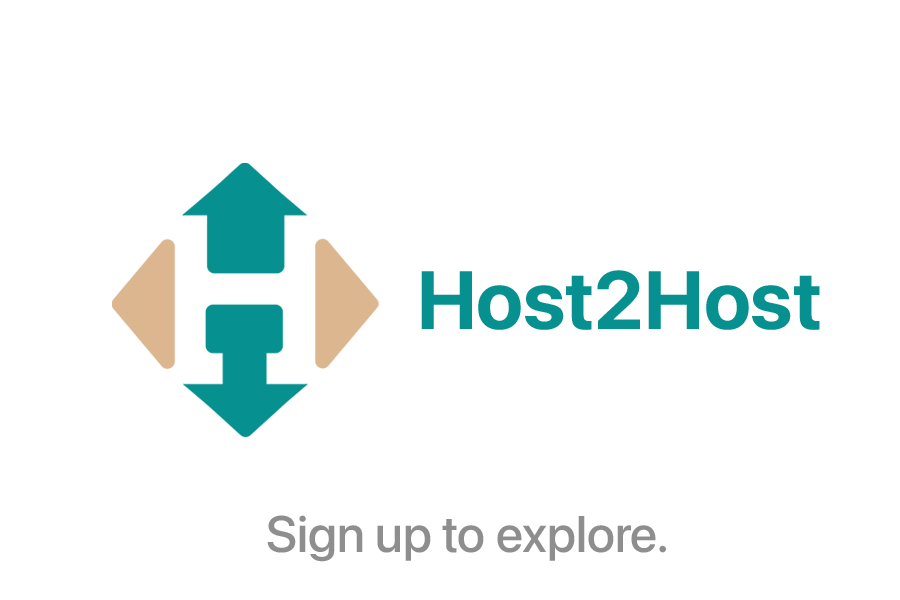
<style>
.page{position:relative;width:900px;height:600px;background:#ffffff}
.page>*{position:absolute;margin:0}
.t1{font:50.9px "SFPro-Medium";color:#8e8e8e}
</style>
<div class="page">
<p class="t1" style="left:267px;top:515px;width:399px;height:47px">Sign up to explore.</p>
</div>
